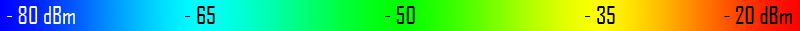
<style>
.page{position:relative;width:800px;height:31px}
.page>*{position:absolute;margin:0}
.t1{font:24px "AgencyFB-Reg";color:#ffffff}
.t2{font:24px "AgencyFB-Reg";color:#000000}
</style>
<div class="page">
<p class="t1" style="left:7px;top:6px;width:68px;height:18px">- 80 dBm</p>
<p class="t2" style="left:185px;top:6px;width:30px;height:18px">- 65</p>
<p class="t2" style="left:385px;top:6px;width:30px;height:18px">- 50</p>
<p class="t2" style="left:585px;top:6px;width:30px;height:18px">- 35</p>
<p class="t2" style="left:724px;top:6px;width:68px;height:18px">- 20 dBm</p>
</div>
